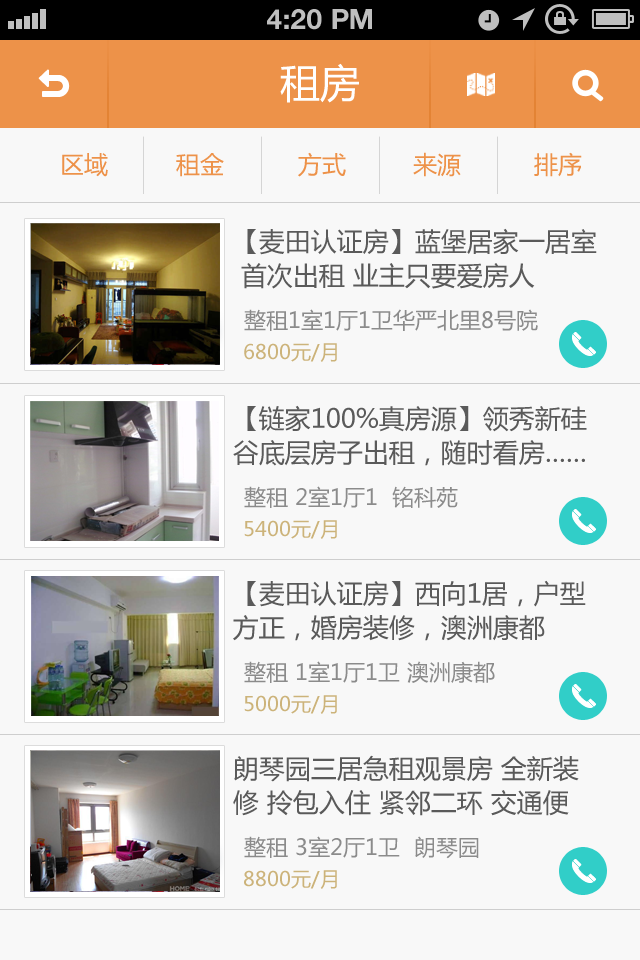
<style>
.page{position:relative;width:640px;height:960px;background:#f8f8f8}
.page>*{position:absolute;margin:0}
.t1{font:28px "HelveticaNeue-Bold";color:#bfbfbf;text-transform:uppercase}
.t2{font:40px "MicrosoftYaHei";color:#ffffff}
.t3{font:24px "MicrosoftYaHei";color:#ed9249}
.t4{font:26px/34px "MicrosoftYaHei";color:#5a5a5a}
.t5{font:22px "MicrosoftYaHei";color:#8b8b8b}
.t6{font:20px "MicrosoftYaHei";color:#ccb37a}
</style>
<div class="page">
<p class="t1" style="left:267px;top:9px;width:105px;height:21px">4:20 PM</p>
<p class="t2" style="left:280px;top:63px;width:79px;height:40px">租房</p>
<p class="t3" style="left:62px;top:153px;width:46px;height:24px">区域</p>
<p class="t3" style="left:176px;top:153px;width:48px;height:24px">租金</p>
<p class="t3" style="left:298px;top:152px;width:48px;height:25px">方式</p>
<p class="t3" style="left:413px;top:152px;width:48px;height:25px">来源</p>
<p class="t3" style="left:534px;top:152px;width:48px;height:25px">排序</p>
<p class="t4" style="left:241px;top:228px;width:356px;height:61px">【麦田认证房】蓝堡居家一居室<br> 首次出租 业主只要爱房人</p>
<p class="t5" style="left:244px;top:309px;width:294px;height:22px">整租1室1厅1卫华严北里8号院</p>
<p class="t6" style="left:244px;top:343px;width:93px;height:19px">6800元/月</p>
<p class="t4" style="left:233px;top:405px;width:354px;height:61px">【链家100%真房源】领秀新硅<br>谷底层房子出租，随时看房……</p>
<p class="t5" style="left:244px;top:486px;width:214px;height:22px">整租 2室1厅1  铭科苑</p>
<p class="t6" style="left:244px;top:520px;width:93px;height:19px">5400元/月</p>
<p class="t4" style="left:233px;top:580px;width:353px;height:61px">【麦田认证房】西向1居，户型<br>方正，婚房装修，澳洲康都</p>
<p class="t5" style="left:244px;top:661px;width:251px;height:22px">整租 1室1厅1卫 澳洲康都</p>
<p class="t6" style="left:244px;top:695px;width:93px;height:19px">5000元/月</p>
<p class="t4" style="left:233px;top:755px;width:346px;height:61px">朗琴园三居急租观景房 全新装<br>修 拎包入住 紧邻二环 交通便</p>
<p class="t5" style="left:244px;top:836px;width:235px;height:23px">整租 3室2厅1卫  朗琴园</p>
<p class="t6" style="left:244px;top:870px;width:93px;height:19px">8800元/月</p>
</div>
